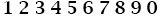
<style>
.page{position:relative;width:160px;height:16px;background:#ffffff}
.page>*{position:absolute;margin:0}
.t1{font:18px "LucidaBright-Demi";color:#000000}
</style>
<div class="page">
<p class="t1" style="left:4px;top:1px;width:8px;height:13px">1</p>
<p class="t1" style="left:19px;top:1px;width:10px;height:13px">2</p>
<p class="t1" style="left:36px;top:1px;width:9px;height:13px">3</p>
<p class="t1" style="left:51px;top:1px;width:10px;height:13px">4</p>
<p class="t1" style="left:68px;top:1px;width:9px;height:13px">5</p>
<p class="t1" style="left:83px;top:1px;width:10px;height:13px">6</p>
<p class="t1" style="left:100px;top:1px;width:10px;height:13px">7</p>
<p class="t1" style="left:115px;top:1px;width:10px;height:13px">8</p>
<p class="t1" style="left:131px;top:1px;width:10px;height:13px">9</p>
<p class="t1" style="left:147px;top:1px;width:11px;height:13px">0</p>
</div>
